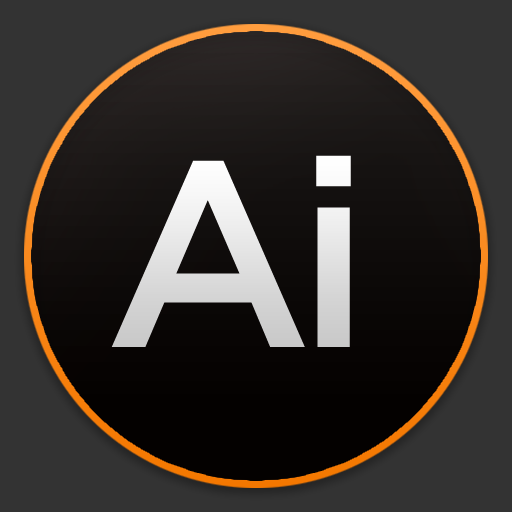
<style>
.page{position:relative;width:512px;height:512px;background:#333333}
.page>*{position:absolute;margin:0}
.t1{font:264px "Gotham-Medium";letter-spacing:-0.04em;color:#dddddd}
</style>
<div class="page">
<p class="t1" style="left:111px;top:155px;width:240px;height:192px">Ai</p>
</div>
